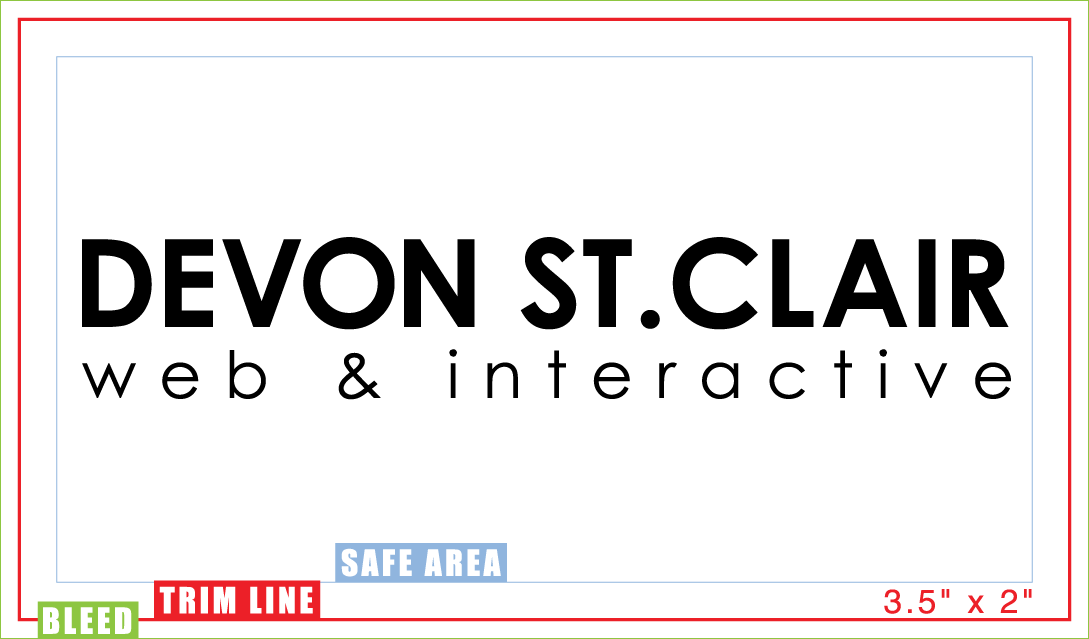
<style>
.page{position:relative;width:1089px;height:639px;background:#ffffff}
.page>*{position:absolute;margin:0}
.t1{font:122px "CenturyGothic-Bold";color:#000000}
.t2{font:122px "CenturyGothic-Bold";letter-spacing:-0.02em;color:#000000}
.t3{font:122px "CenturyGothic-Bold";letter-spacing:0.005em;color:#000000}
.t4{font:122px "CenturyGothic-Bold";letter-spacing:-0.055em;color:#000000}
.t5{font:122px "CenturyGothic-Bold";letter-spacing:-0.05em;color:#000000}
.t6{font:122px "CenturyGothic-Bold";letter-spacing:0.03em;color:#000000}
.t7{font:122px "CenturyGothic-Bold";letter-spacing:-0.025em;color:#000000}
.t8{font:65px "CenturyGothic";letter-spacing:0.356em;color:#000000}
</style>
<div class="page">
<p class="t1" style="left:82px;top:237px;width:927px;height:93px"><span class="t2">D</span><span class="t3">E</span><span class="t4">V</span><span class="t5">O</span>N ST.C<span class="t6">L</span>A<span class="t7">IR</span></p>
<p class="t8" style="left:82px;top:349px;width:929px;height:51px">web &amp; interactive</p>
</div>
